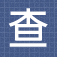
<style>
.page{position:relative;width:57px;height:57px}
.page>*{position:absolute;margin:0}
.t1{font:42.4px "AdobeFanHeitiStd-Bold";color:#ffffff}
</style>
<div class="page">
<p class="t1" style="left:8px;top:8px;width:40px;height:39px">查</p>
</div>
